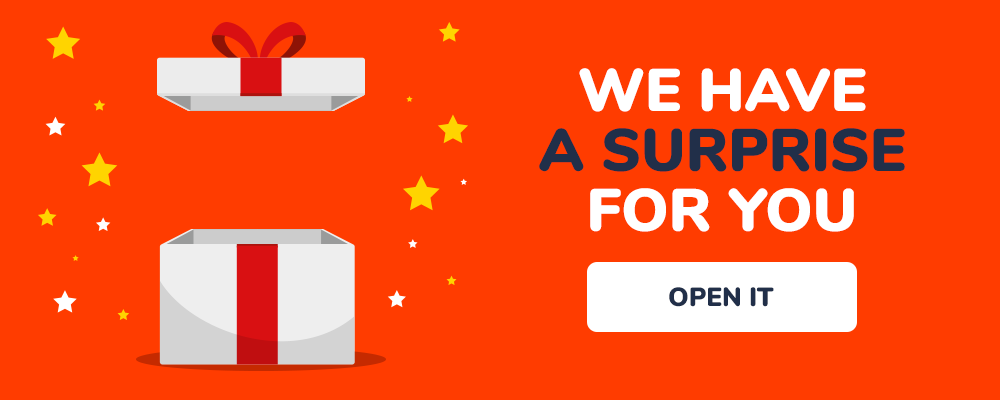
<style>
.page{position:relative;width:1000px;height:400px;background:#ff3c00}
.page>*{position:absolute;margin:0}
.t1{font:60px/60px "Nunito-Black";color:#212f49;text-transform:uppercase}
.t2{font:60px/60px "Nunito-Black";color:#ffffff;text-transform:uppercase}
.t3{font:26px "Nunito-Black";color:#212f49;text-transform:uppercase}
</style>
<div class="page">
<p class="t1" style="left:539px;top:68px;width:366px;height:164px;text-align:center"><span class="t2">WE have<br></span>a surprise<br><span class="t2">for you</span></p>
<p class="t3" style="left:669px;top:287px;width:105px;height:20px">Open it</p>
</div>
